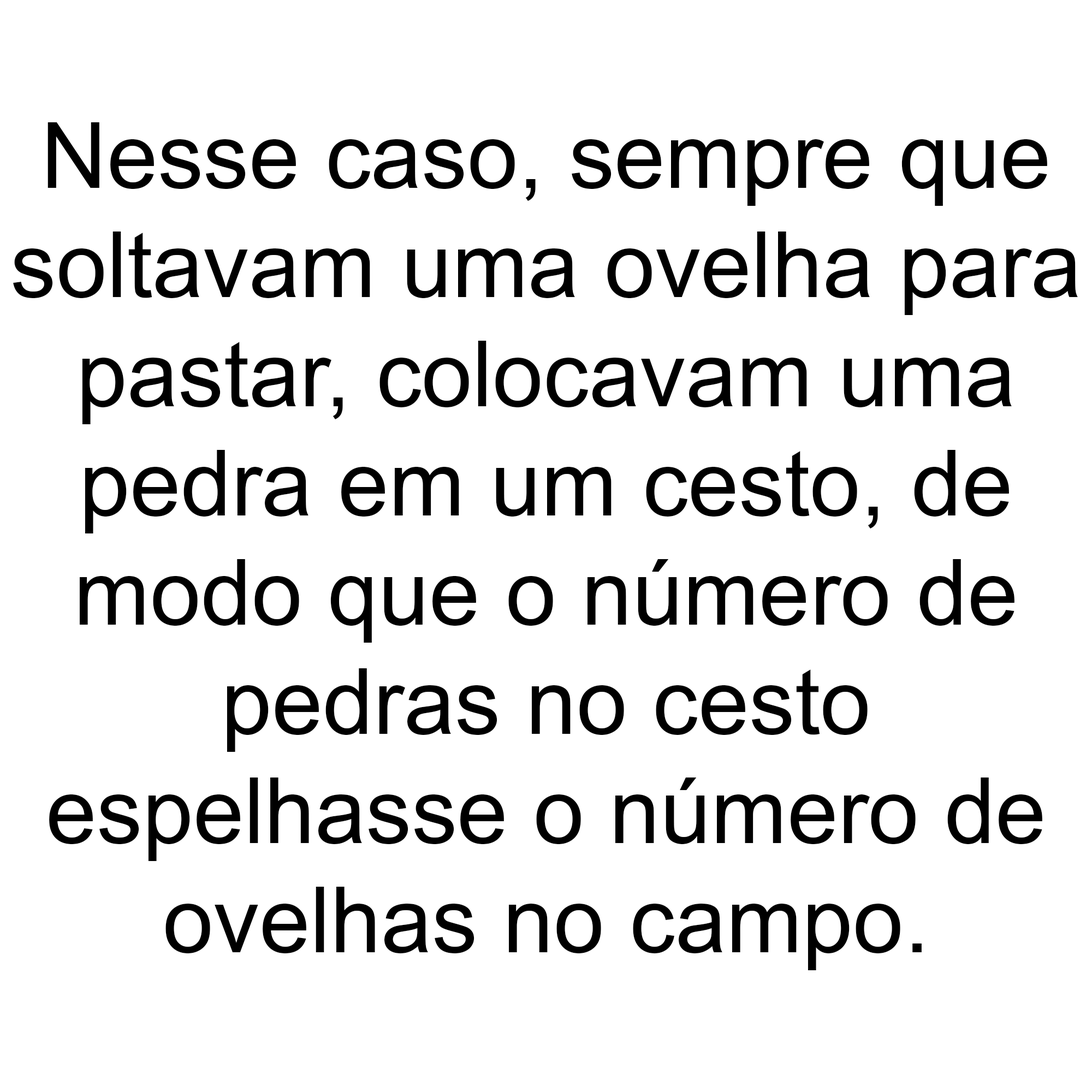
<style>
.page{position:relative;width:1092px;height:1092px;background:#ffffff}
.page>*{position:absolute;margin:0}
.t1{font:91px "ArialMT";color:#000000}
</style>
<div class="page">
<p class="t1" style="left:13px;top:122px;width:1065px;height:848px;text-align:center">Nesse caso, sempre que<br>soltavam uma ovelha para<br>pastar, colocavam uma<br>pedra em um cesto, de<br>modo que o número de<br>pedras no cesto<br>espelhasse o número de<br>ovelhas no campo.</p>
</div>
